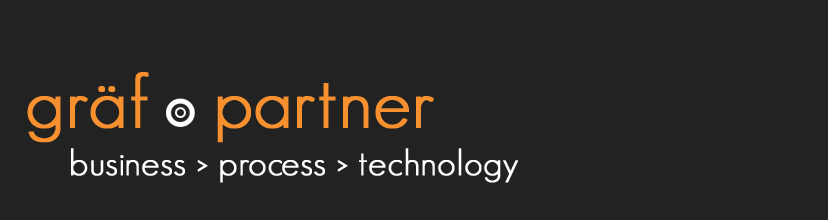
<style>
.page{position:relative;width:828px;height:220px;background:#222222}
.page>*{position:absolute;margin:0}
.t1{font:36px/24px "GeosansLight";color:#ffffff;font-weight:bold}
.t2{font:74px/24px "GeosansLight";color:#f7912f;font-weight:bold}
</style>
<div class="page">
<p class="t1" style="left:27px;top:72px;width:491px;height:111px"><span class="t2">gräf   partner<br><br>  </span>business &gt; process &gt; technology</p>
</div>
